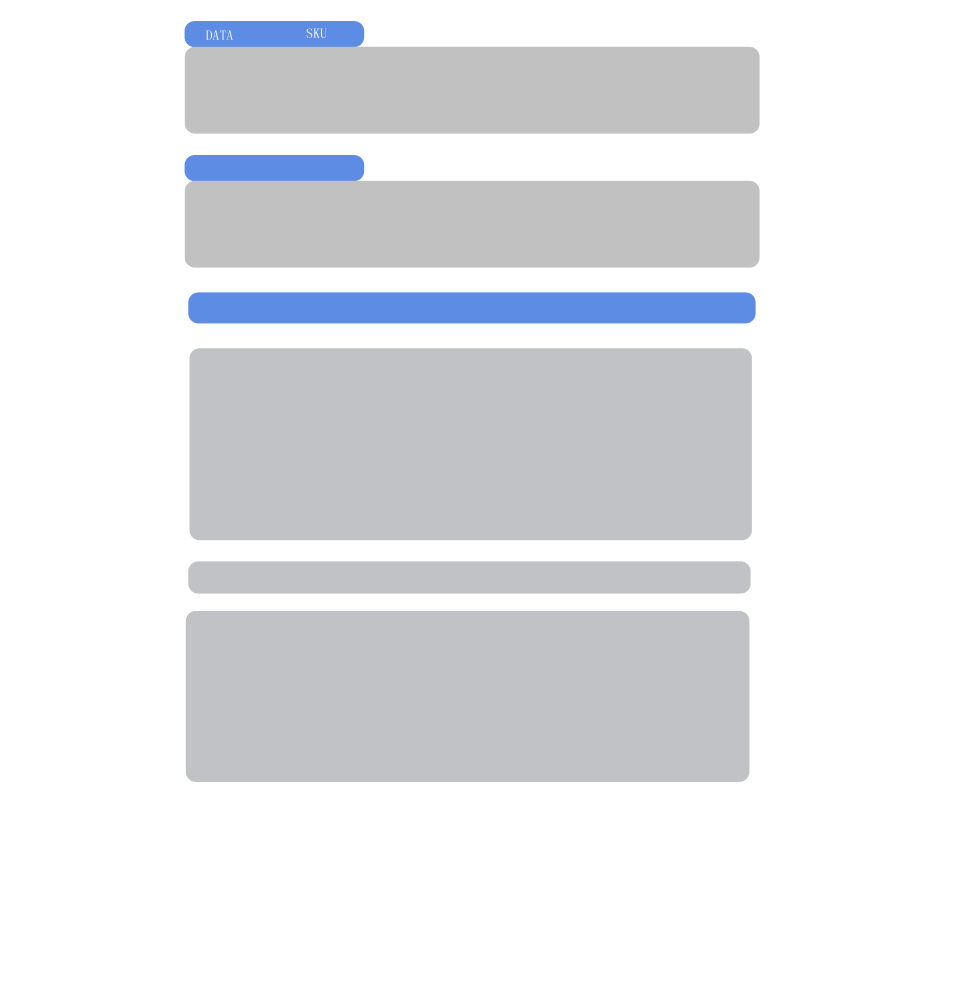
<style>
.page{position:relative;width:960px;height:1000px;background:#ffffff}
.page>*{position:absolute;margin:0}
.t1{font:14px "SimSun";color:#fefcfc}
</style>
<div class="page">
<p class="t1" style="left:206px;top:30px;width:27px;height:10px">DATA</p>
<p class="t1" style="left:306px;top:28px;width:21px;height:10px">SKU</p>
</div>
